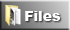
<style>
.page{position:relative;width:70px;height:30px}
.page>*{position:absolute;margin:0}
.t1{font:13.9px "Arial-Black";color:#ffffff}
</style>
<div class="page">
<p class="t1" style="left:25px;top:11px;width:36px;height:10px">Files</p>
</div>
